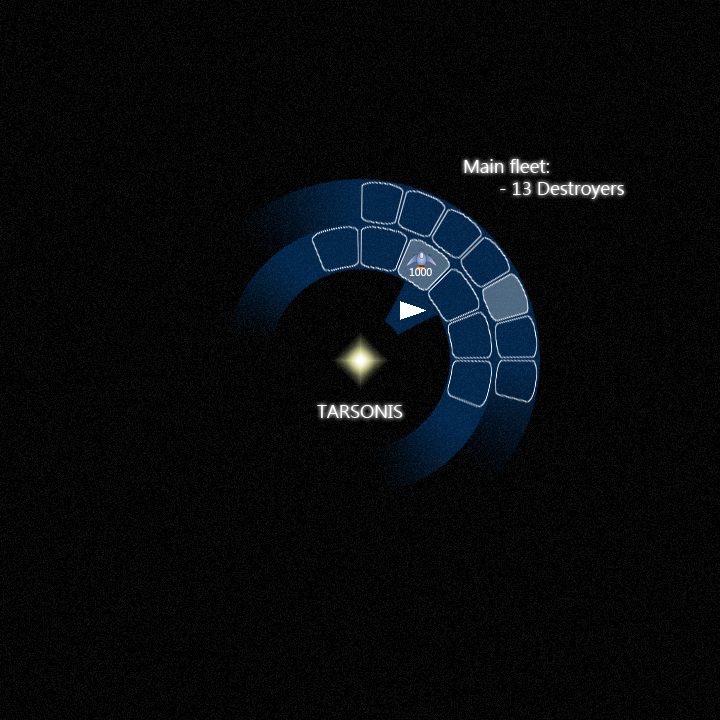
<style>
.page{position:relative;width:720px;height:720px;background:#000000}
.page>*{position:absolute;margin:0}
.t1{font:18.7px "Ebrima";color:#ffffff}
.t2{font:10.7px "Ebrima";color:#ffffff}
</style>
<div class="page">
<p class="t1" style="left:464px;top:159px;width:160px;height:40px">Main fleet:<br> - 13 Destroyers</p>
<p class="t2" style="left:409px;top:268px;width:23px;height:8px">1000</p>
<p class="t1" style="left:317px;top:405px;width:86px;height:13px">TARSONIS</p>
</div>
